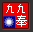
<style>
.page{position:relative;width:33px;height:32px;background:#f20000}
.page>*{position:absolute;margin:0}
.t1{font:10.4px "SimSun";color:#ffffff}
.t2{font:11.7px "SimSun";color:#ffffff}
</style>
<div class="page">
<p class="t1" style="left:6px;top:4px;width:19px;height:9px">九九</p>
<p class="t2" style="left:16px;top:15px;width:11px;height:12px">奉</p>
</div>
